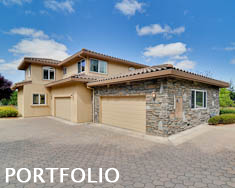
<style>
.page{position:relative;width:235px;height:188px}
.page>*{position:absolute;margin:0}
.t1{font:20px "LucidaSansUnicode";color:#ffffff;font-weight:bold}
</style>
<div class="page">
<p class="t1" style="left:5px;top:168px;width:115px;height:15px">PORTFOLIO</p>
</div>
